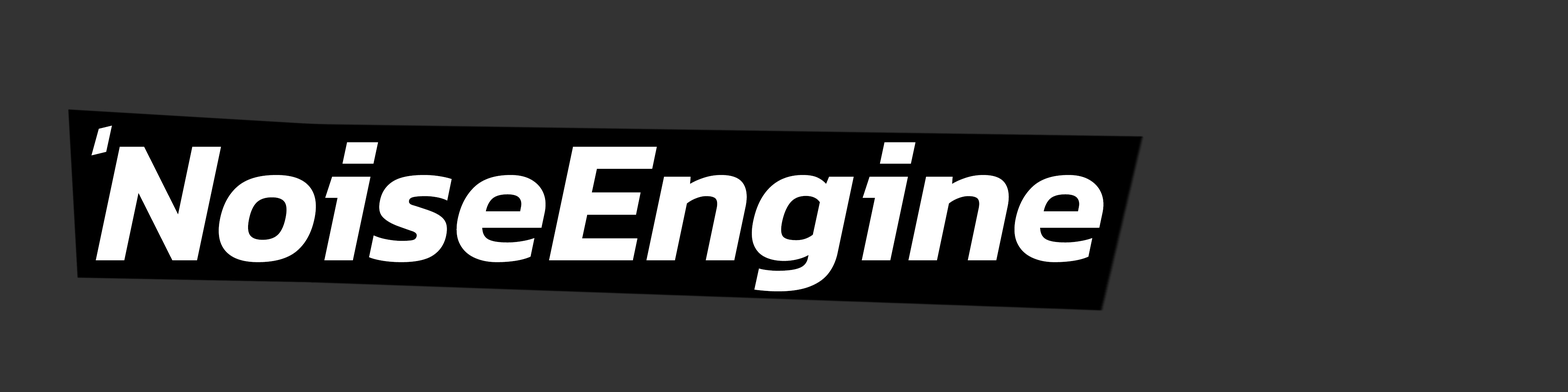
<style>
.page{position:relative;width:1568px;height:392px;background:#333333}
.page>*{position:absolute;margin:0}
.t1{font:110.1px "Kanit-SemiBoldItalic";color:#ffffff}
.t2{font:176.1px "Kanit-SemiBoldItalic";color:#ffffff}
</style>
<div class="page">
<p class="t1" style="left:91px;top:126px;width:21px;height:29px;rotate:-14deg">‘</p>
<p class="t2" style="left:96px;top:142px;width:1008px;height:149px">NoiseEngine</p>
</div>
